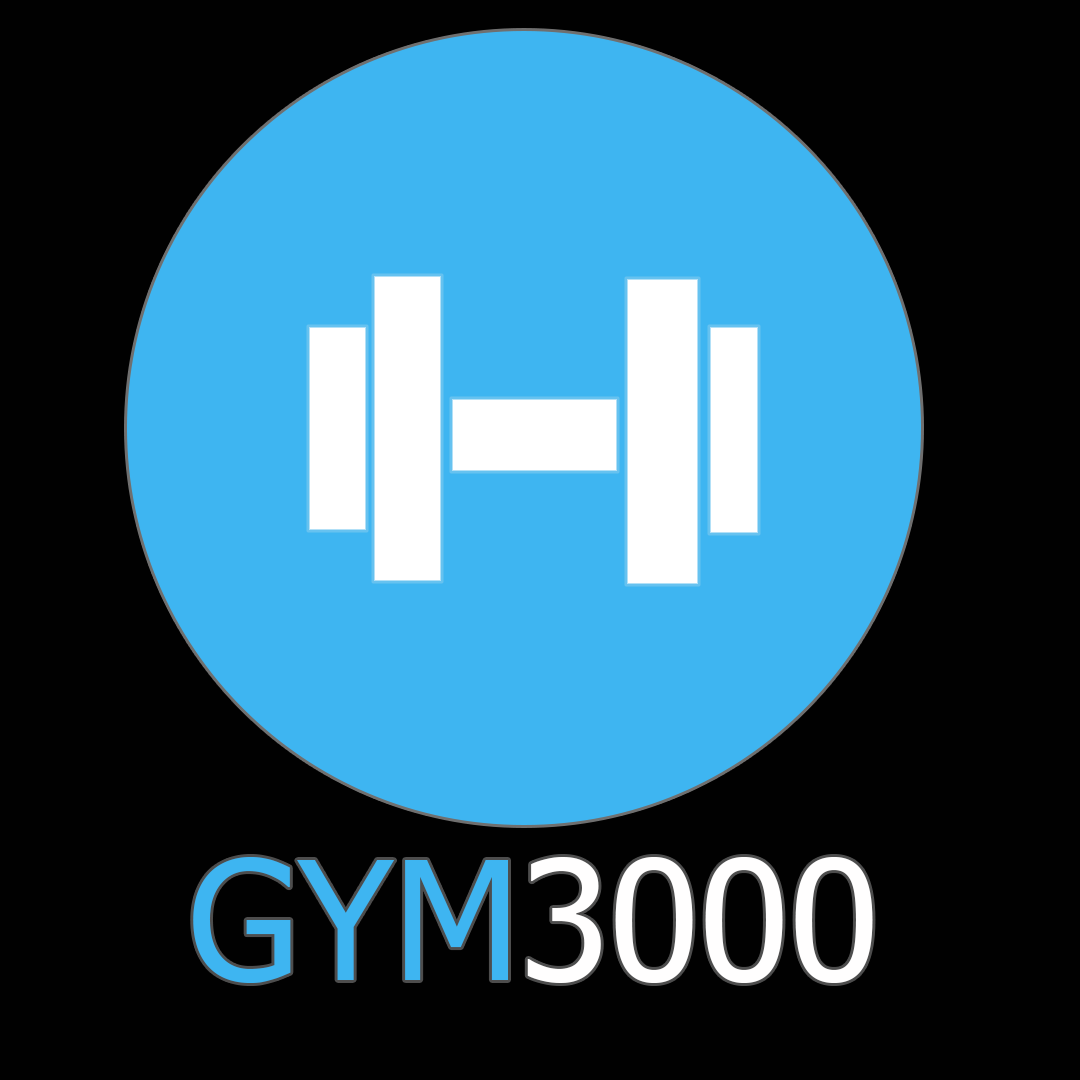
<style>
.page{position:relative;width:1080px;height:1080px;background:#010101}
.page>*{position:absolute;margin:0}
.t1{font:164.9px "Tahoma";color:#fffefe}
.t2{font:164.9px "Tahoma";color:#3eb5f1}
</style>
<div class="page">
<p class="t1" style="left:193px;top:857px;width:680px;height:126px"><span class="t2">GYM</span>3000</p>
</div>
